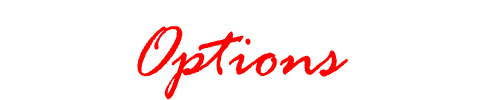
<style>
.page{position:relative;width:500px;height:100px;background:#ffffff}
.page>*{position:absolute;margin:0}
.t1{font:78px "RageItalic";color:#ff0000}
</style>
<div class="page">
<p class="t1" style="left:137px;top:26px;width:211px;height:74px">Options</p>
</div>
